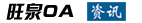
<style>
.page{position:relative;width:142px;height:23px;background:#ffffff}
.page>*{position:absolute;margin:0}
.t1{font:18px "HYk2gj";color:#030303;font-style:italic}
</style>
<div class="page">
<p class="t1" style="left:6px;top:3px;width:68px;height:17px">旺泉OA</p>
</div>
